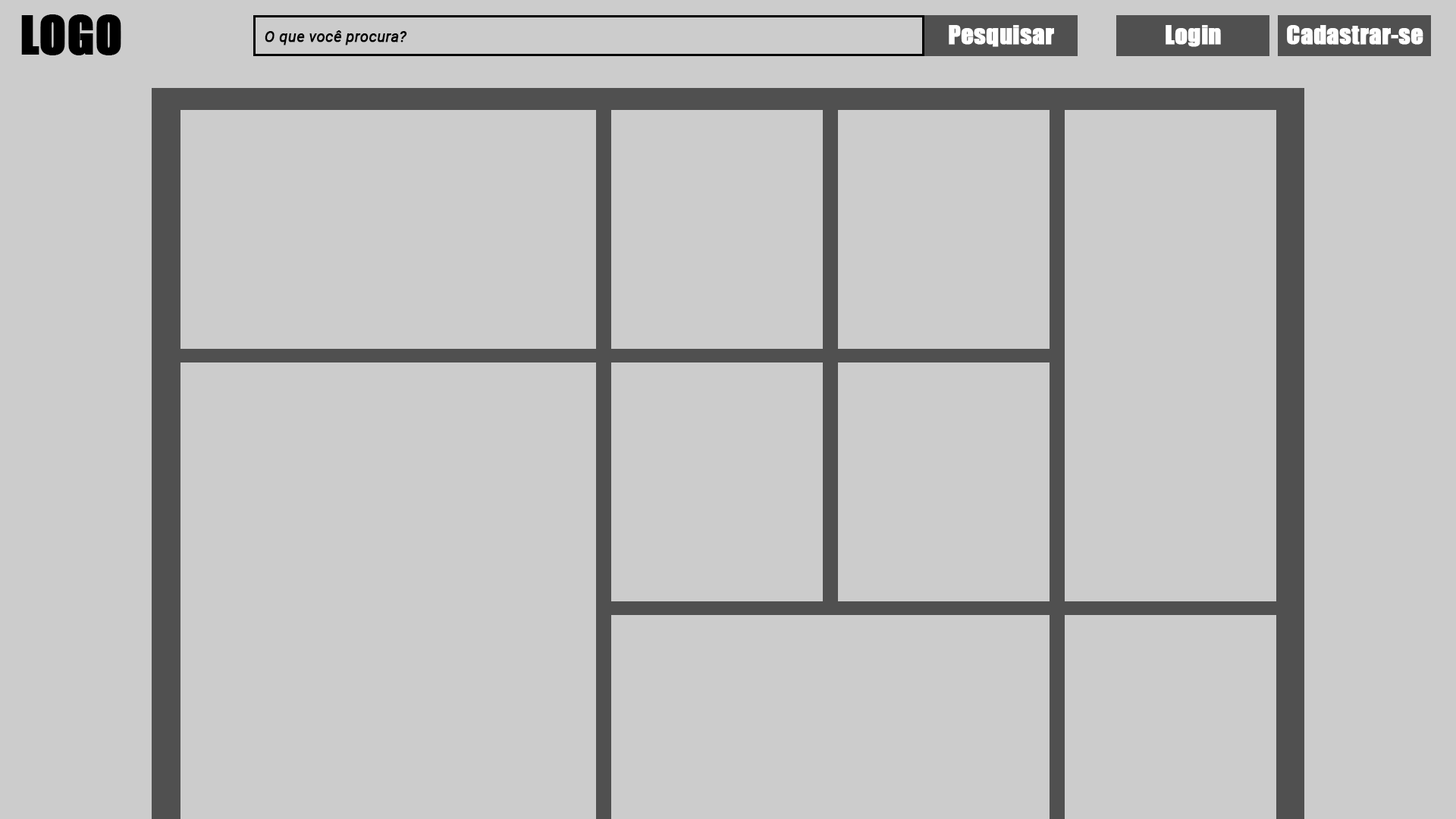
<style>
.page{position:relative;width:1456px;height:819px;background:#cccccc}
.page>*{position:absolute;margin:0}
.t1{font:48.5px "Impact";color:#000000;font-weight:bold}
.t2{font:24.3px "Impact";color:#ffffff;font-weight:bold}
.t3{font:15.2px "Roboto-Italic";color:#000000;font-weight:bold}
</style>
<div class="page">
<p class="t1" style="left:21px;top:14px;width:100px;height:41px">LOGO</p>
<p class="t2" style="left:949px;top:25px;width:105px;height:22px">Pesquisar</p>
<p class="t2" style="left:1166px;top:25px;width:55px;height:22px">Login</p>
<p class="t2" style="left:1287px;top:25px;width:136px;height:20px">Cadastrar-se</p>
<p class="t3" style="left:265px;top:30px;width:142px;height:15px">O que você procura?</p>
</div>
